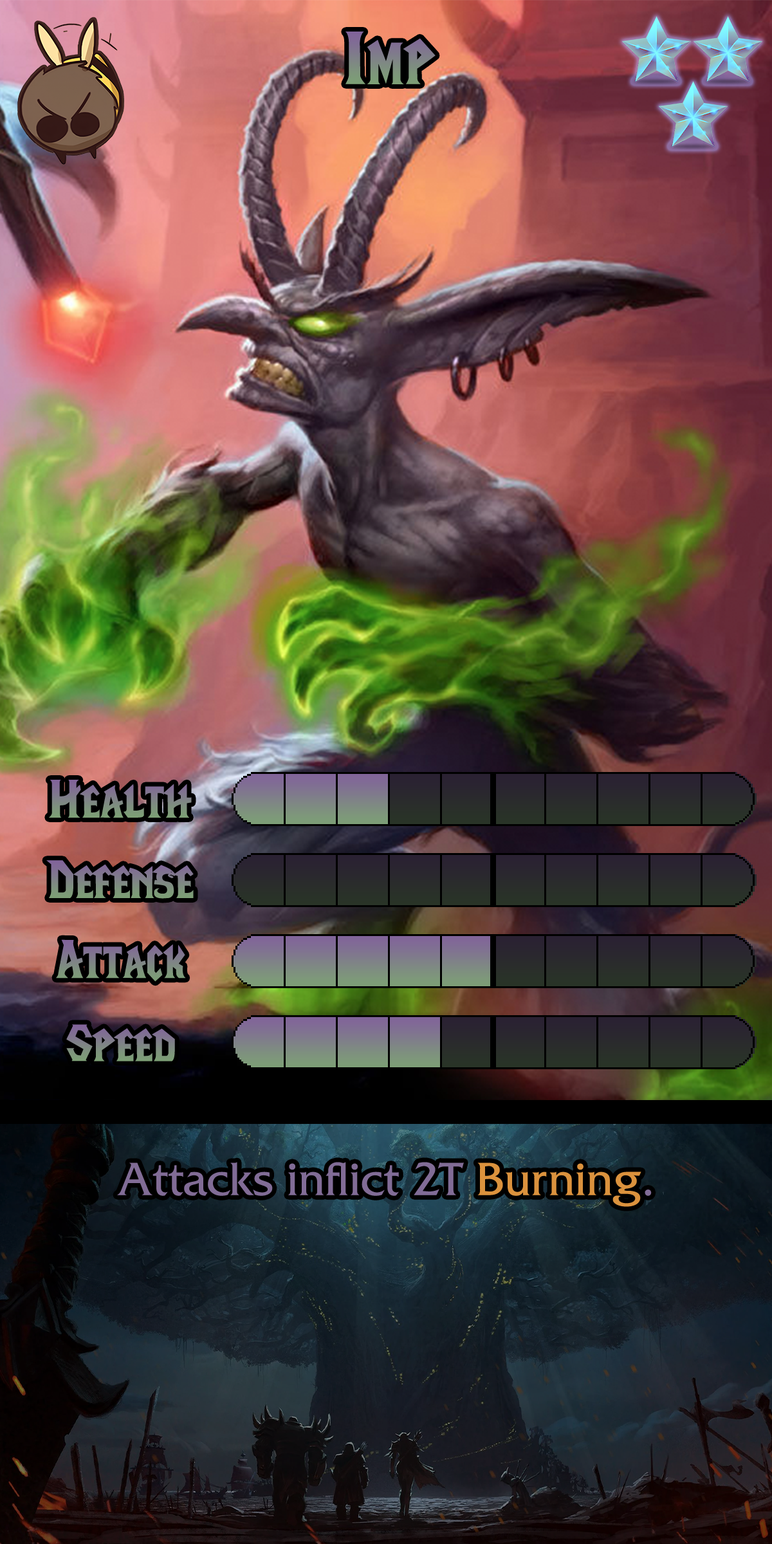
<style>
.page{position:relative;width:772px;height:1544px}
.page>*{position:absolute;margin:0}
.t1{font:128.7px "LifeCraft";color:#7f8486}
.t2{font:92.7px "LifeCraft"}
.t3{font:92.7px "LifeCraft";color:#7f8486}
.t4{font:83.6px "FrizQuadrataStd";color:#816c96}
.t5{font:83.6px "FrizQuadrataStd";color:#db923d}
</style>
<div class="page">
<p class="t1" style="left:346px;top:32px;width:90px;height:52px">Imp</p>
<p class="t2" style="left:49px;top:780px;width:143px;height:38px">Health</p>
<p class="t2" style="left:46px;top:860px;width:148px;height:39px">Defense</p>
<p class="t3" style="left:56px;top:939px;width:130px;height:43px">Attack</p>
<p class="t2" style="left:66px;top:1024px;width:109px;height:38px">Speed</p>
<p class="t4" style="left:117px;top:1162px;width:535px;height:45px">Attacks inflict 2T <span class="t5">Burning</span>.</p>
</div>
